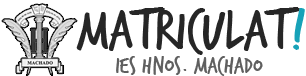
<style>
.page{position:relative;width:306px;height:76px;background:#ffffff}
.page>*{position:absolute;margin:0}
.t1{font:59.7px "TrashHand";color:#262626}
.t2{font:59.7px "TrashHand";color:#17a2b8}
.t3{font:25.1px "TrashHand";color:#5f5f5f}
</style>
<div class="page">
<p class="t1" style="left:76px;top:7px;width:229px;height:48px">MatriculaT<span class="t2">!</span></p>
<p class="t3" style="left:116px;top:56px;width:147px;height:20px">IES HNOS. MACHADO</p>
</div>
